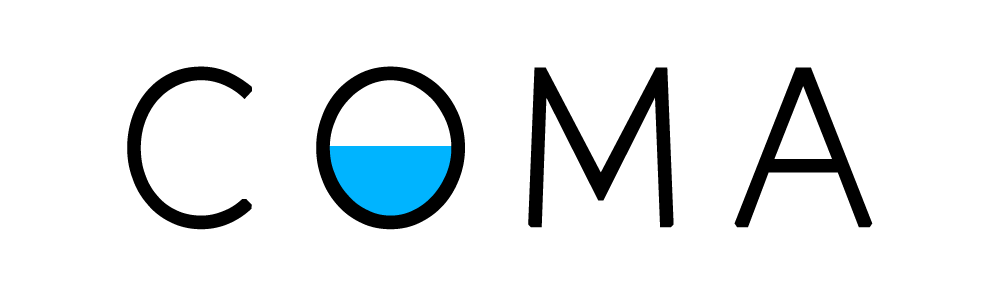
<style>
.page{position:relative;width:1000px;height:300px;background:#ffffff}
.page>*{position:absolute;margin:0}
.t1{font:200px "THEJung110";letter-spacing:0.2em;color:#000000;font-weight:bold}
</style>
<div class="page">
<p class="t1" style="left:127px;top:66px;width:746px;height:164px">COMA</p>
</div>
